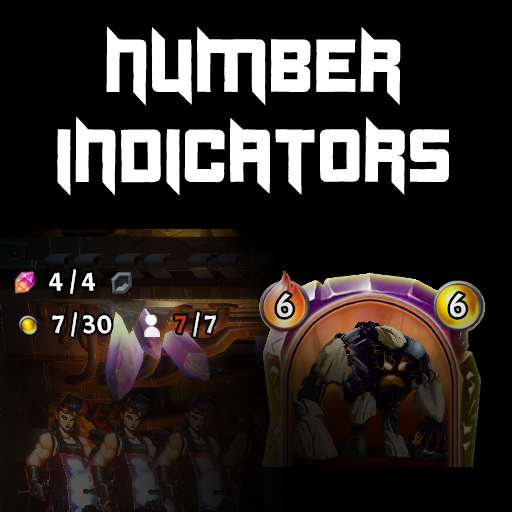
<style>
.page{position:relative;width:512px;height:512px;background:#000000}
.page>*{position:absolute;margin:0}
.t1{font:75px "Duplexide";color:#ffffff}
</style>
<div class="page">
<p class="t1" style="left:57px;top:26px;width:392px;height:170px;text-align:center">Number<br>Indicators</p>
</div>
